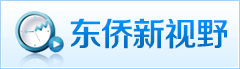
<style>
.page{position:relative;width:240px;height:69px}
.page>*{position:absolute;margin:0}
.t1{font:33px "FZZZHONGJW--GB1-0";letter-spacing:-0.04em}
</style>
<div class="page">
<p class="t1" style="left:70px;top:18px;width:157px;height:31px">东侨新视野</p>
</div>
